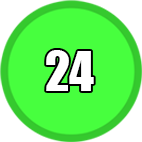
<style>
.page{position:relative;width:142px;height:142px;background:#47ff3e}
.page>*{position:absolute;margin:0}
.t1{font:50px "Impact";color:#ffffff}
</style>
<div class="page">
<p class="t1" style="left:46px;top:50px;width:48px;height:41px">24</p>
</div>
